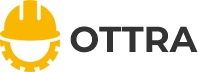
<style>
.page{position:relative;width:198px;height:72px;background:#ffffff}
.page>*{position:absolute;margin:0}
.t1{font:36px "Montserrat-Bold";color:#333333}
</style>
<div class="page">
<p class="t1" style="left:70px;top:26px;width:128px;height:27px">OTTRA</p>
</div>
